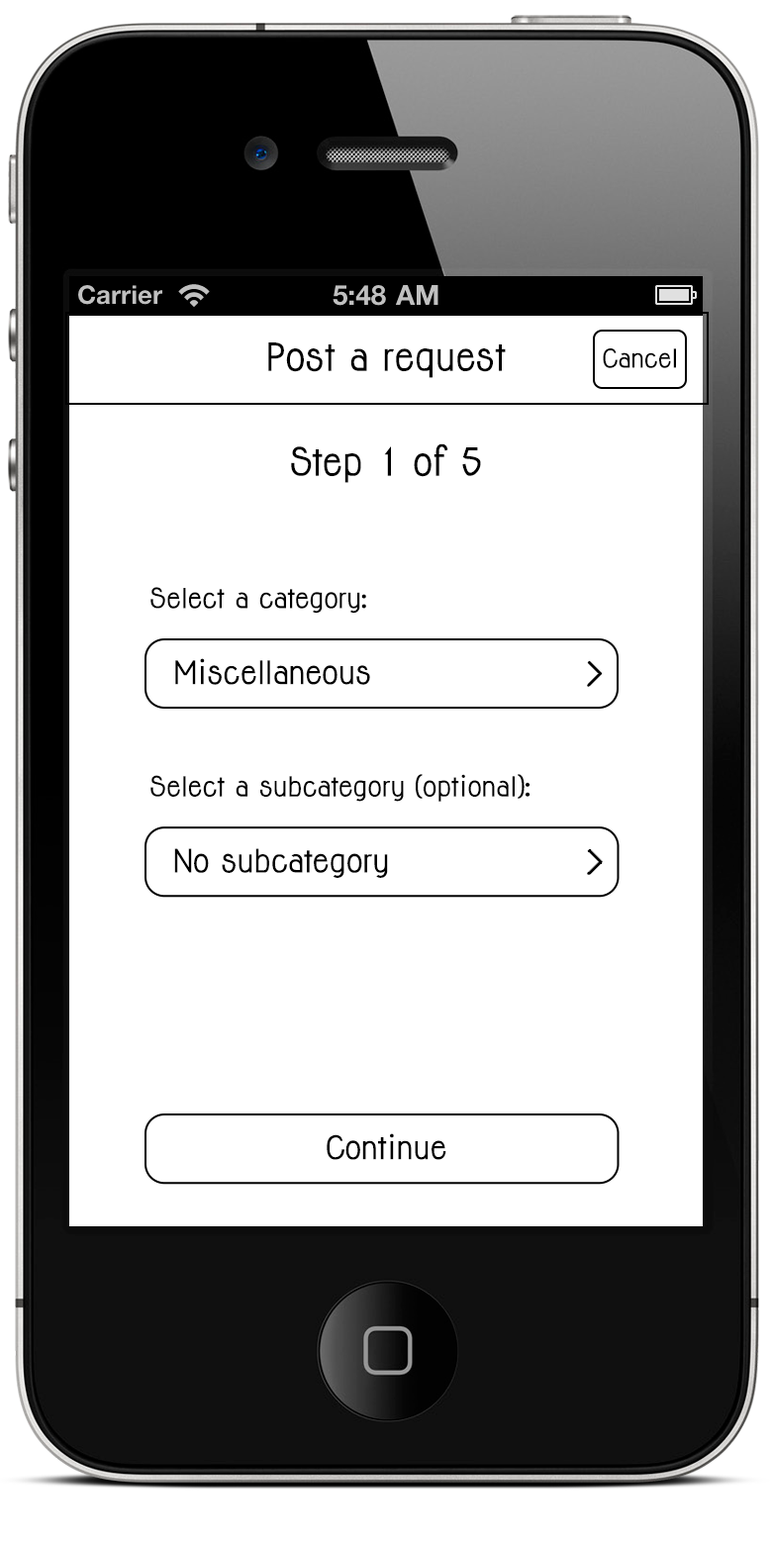
<style>
.page{position:relative;width:772px;height:1545px;background:#ffffff}
.page>*{position:absolute;margin:0}
.t1{font:35.6px "Jolly-Bold";color:#000000}
.t2{font:23.8px "Jolly-Bold";color:#000000}
.t3{font:25.5px "Jolly-Bold";color:#000000}
.t4{font:29.7px "Jolly-Bold";color:#000000}
.t5{font:25.6px "Jolly-Bold";color:#000000}
.t6{font:29.8px "Jolly-Bold";color:#000000}
</style>
<div class="page">
<p class="t1" style="left:268px;top:342px;width:238px;height:36px">Post a request</p>
<p class="t2" style="left:603px;top:348px;width:73px;height:20px">Cancel</p>
<p class="t1" style="left:291px;top:443px;width:190px;height:40px">Step 1 of 5</p>
<p class="t3" style="left:150px;top:587px;width:216px;height:27px">Select a category:</p>
<p class="t4" style="left:175px;top:658px;width:195px;height:27px">Miscellaneous</p>
<p class="t5" style="left:150px;top:774px;width:380px;height:28px">Select a subcategory (optional):</p>
<p class="t6" style="left:174px;top:848px;width:214px;height:30px">No subcategory</p>
<p class="t6" style="left:327px;top:1133px;width:119px;height:27px">Continue</p>
</div>
